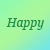
<style>
.page{position:relative;width:50px;height:50px}
.page>*{position:absolute;margin:0}
.t1{font:12px "Georgia-Italic";color:#1b9350}
</style>
<div class="page">
<p class="t1" style="left:6px;top:18px;width:38px;height:12px">Happy</p>
</div>
